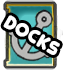
<style>
.page{position:relative;width:63px;height:70px;background:#ffffff}
.page>*{position:absolute;margin:0}
.t1{font:22.5px "Junegull";color:#ffffff}
</style>
<div class="page">
<p class="t1" style="left:3px;top:15px;width:57px;height:40px;rotate:30deg">DOCKS</p>
</div>
